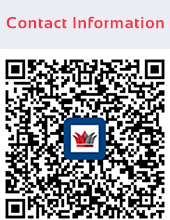
<style>
.page{position:relative;width:170px;height:220px;background:#ffffff}
.page>*{position:absolute;margin:0}
.t1{font:12px "Sansation-Bold";letter-spacing:0.05em;color:#ef364b}
</style>
<div class="page">
<p class="t1" style="left:6px;top:16px;width:158px;height:13px">Contact Information</p>
</div>
